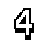
<style>
.page{position:relative;width:48px;height:48px;background:#ffffff}
.page>*{position:absolute;margin:0}
.t1{font:36px "KarmaFuture-Regular";color:#010101}
</style>
<div class="page">
<p class="t1" style="left:14px;top:8px;width:20px;height:32px">4</p>
</div>
